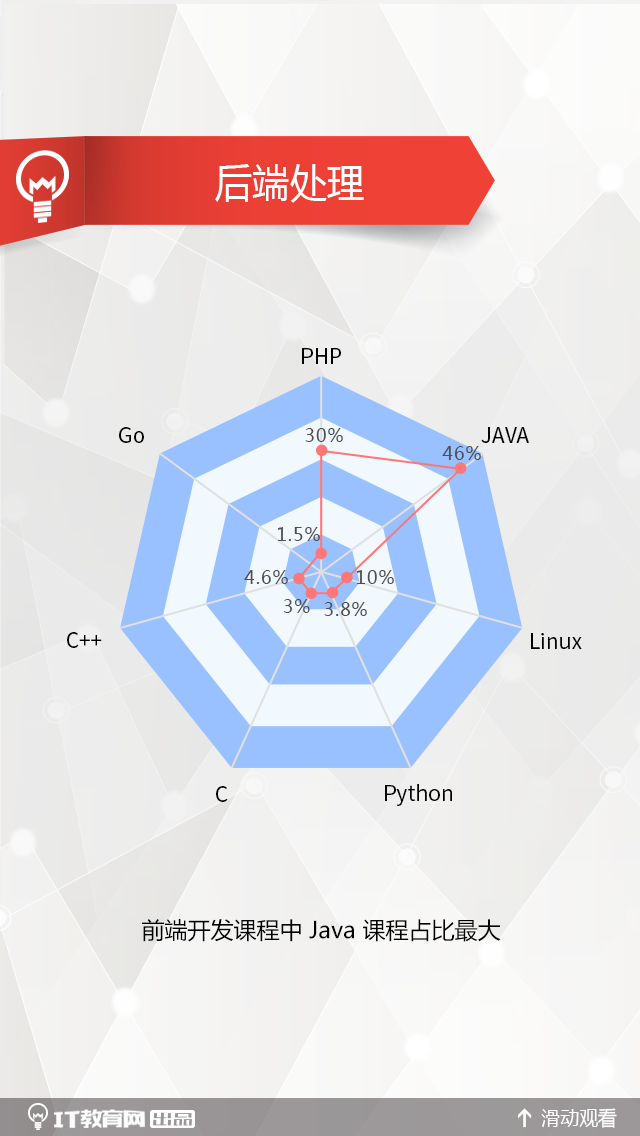
<style>
.page{position:relative;width:640px;height:1136px}
.page>*{position:absolute;margin:0}
.t1{font:40px "MicrosoftYaHei";color:#ffffff;scale:0.93 1}
.t2{font:21px "NotoSansHans-Regular";color:#000000}
.t3{font:18px "MicrosoftYaHei";letter-spacing:0.05em;color:#4f4f4f}
.t4{font:23px "MicrosoftYaHei";color:#000000}
.t5{font:20.2px "MicrosoftYaHei";color:#ffffff;scale:0.94 1}
</style>
<div class="page">
<p class="t1" style="left:215px;top:164px;width:149px;height:39px">后端处理</p>
<p class="t2" style="left:302px;top:348px;width:39px;height:16px">PHP</p>
<p class="t2" style="left:119px;top:427px;width:25px;height:16px">Go</p>
<p class="t3" style="left:305px;top:428px;width:38px;height:14px">30%</p>
<p class="t2" style="left:481px;top:427px;width:48px;height:16px">JAVA</p>
<p class="t3" style="left:442px;top:446px;width:39px;height:14px">46%</p>
<p class="t3" style="left:278px;top:527px;width:42px;height:14px">1.5%</p>
<p class="t3" style="left:244px;top:570px;width:44px;height:14px">4.6%</p>
<p class="t3" style="left:357px;top:570px;width:37px;height:14px">10%</p>
<p class="t3" style="left:283px;top:599px;width:27px;height:14px">3%</p>
<p class="t3" style="left:324px;top:602px;width:43px;height:14px">3.8%</p>
<p class="t2" style="left:67px;top:632px;width:35px;height:16px">C++</p>
<p class="t2" style="left:531px;top:633px;width:51px;height:16px">Linux</p>
<p class="t2" style="left:385px;top:784px;width:67px;height:22px">Python</p>
<p class="t2" style="left:216px;top:786px;width:12px;height:16px">C</p>
<p class="t4" style="left:142px;top:919px;width:359px;height:23px">前端开发课程中 Java 课程占比最大</p>
<p class="t5" style="left:541px;top:1108px;width:76px;height:20px">滑动观看</p>
</div>
